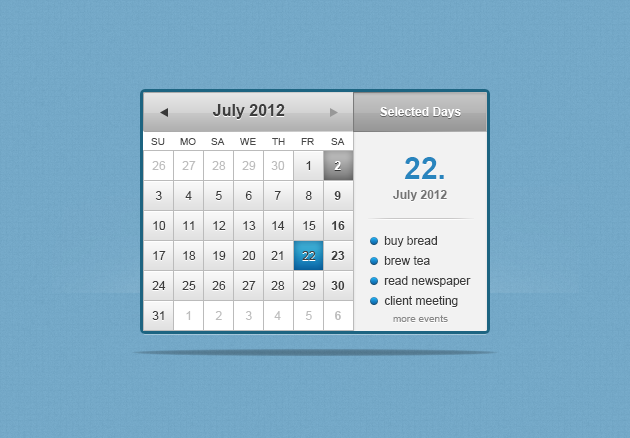
<style>
.page{position:relative;width:630px;height:438px}
.page>*{position:absolute;margin:0}
.t1{font:16px "Arial-BoldMT";color:#3e3e3e}
.t2{font:12px "Arial-BoldMT";color:#ffffff}
.t3{font:10px "ArialMT";color:#494949}
.t4{font:12px "ArialMT";color:#bdbdbd}
.t5{font:12px "ArialMT";color:#3d3d3d}
.t6{font:30px "Arial-BoldMT";color:#2985be}
.t7{font:12px "Arial-BoldMT";color:#3d3d3d}
.t8{font:12px "Arial-BoldMT";color:#737373}
.t9{font:12px/20px "ArialMT";color:#3d3d3d}
.t10{font:12px "Arial-BoldMT";color:#bdbdbd}
.t11{font:10px "ArialMT";color:#888888}
</style>
<div class="page">
<p class="t1" style="left:212px;top:104px;width:73px;height:15px">July 2012</p>
<p class="t2" style="left:380px;top:107px;width:81px;height:11px">Selected Days</p>
<p class="t3" style="left:151px;top:138px;width:14px;height:7px">SU</p>
<p class="t3" style="left:180px;top:138px;width:16px;height:7px">MO</p>
<p class="t3" style="left:211px;top:138px;width:14px;height:7px">SA</p>
<p class="t3" style="left:240px;top:138px;width:16px;height:7px">WE</p>
<p class="t3" style="left:272px;top:138px;width:13px;height:7px">TH</p>
<p class="t3" style="left:301px;top:138px;width:13px;height:7px">FR</p>
<p class="t3" style="left:331px;top:138px;width:14px;height:7px">SA</p>
<p class="t4" style="left:152px;top:161px;width:14px;height:9px">26</p>
<p class="t4" style="left:182px;top:161px;width:14px;height:9px">27</p>
<p class="t4" style="left:212px;top:161px;width:14px;height:9px">28</p>
<p class="t4" style="left:242px;top:161px;width:14px;height:9px">29</p>
<p class="t4" style="left:271px;top:161px;width:14px;height:9px">30</p>
<p class="t5" style="left:306px;top:161px;width:5px;height:9px">1</p>
<p class="t2" style="left:334px;top:161px;width:7px;height:9px">2</p>
<p class="t6" style="left:404px;top:157px;width:40px;height:22px">22.</p>
<p class="t5" style="left:155px;top:191px;width:7px;height:9px">3</p>
<p class="t5" style="left:185px;top:191px;width:7px;height:9px">4</p>
<p class="t5" style="left:215px;top:191px;width:7px;height:9px">5</p>
<p class="t5" style="left:245px;top:191px;width:7px;height:9px">6</p>
<p class="t5" style="left:274px;top:191px;width:7px;height:9px">7</p>
<p class="t5" style="left:305px;top:191px;width:7px;height:9px">8</p>
<p class="t7" style="left:334px;top:191px;width:7px;height:9px">9</p>
<p class="t8" style="left:393px;top:190px;width:54px;height:11px">July 2012</p>
<p class="t5" style="left:153px;top:221px;width:13px;height:9px">10</p>
<p class="t5" style="left:183px;top:221px;width:11px;height:9px">11</p>
<p class="t5" style="left:213px;top:221px;width:13px;height:9px">12</p>
<p class="t5" style="left:243px;top:221px;width:13px;height:9px">13</p>
<p class="t5" style="left:272px;top:221px;width:13px;height:9px">14</p>
<p class="t5" style="left:303px;top:221px;width:13px;height:9px">15</p>
<p class="t7" style="left:332px;top:221px;width:13px;height:9px">16</p>
<p class="t9" style="left:384px;top:236px;width:87px;height:71px">buy bread<br>brew tea<br>read newspaper<br>client meeting</p>
<p class="t5" style="left:153px;top:251px;width:13px;height:9px">17</p>
<p class="t5" style="left:183px;top:251px;width:13px;height:9px">18</p>
<p class="t5" style="left:213px;top:251px;width:13px;height:9px">19</p>
<p class="t5" style="left:242px;top:251px;width:14px;height:9px">20</p>
<p class="t5" style="left:271px;top:251px;width:12px;height:9px">21</p>
<p class="t5" style="left:302px;top:251px;width:14px;height:9px">22</p>
<p class="t7" style="left:331px;top:251px;width:14px;height:9px">23</p>
<p class="t5" style="left:152px;top:281px;width:14px;height:9px">24</p>
<p class="t5" style="left:182px;top:281px;width:14px;height:9px">25</p>
<p class="t5" style="left:212px;top:281px;width:14px;height:9px">26</p>
<p class="t5" style="left:242px;top:281px;width:14px;height:9px">27</p>
<p class="t5" style="left:271px;top:281px;width:14px;height:9px">28</p>
<p class="t5" style="left:302px;top:281px;width:14px;height:9px">29</p>
<p class="t7" style="left:331px;top:281px;width:14px;height:9px">30</p>
<p class="t5" style="left:152px;top:311px;width:12px;height:9px">31</p>
<p class="t4" style="left:186px;top:311px;width:5px;height:9px">1</p>
<p class="t4" style="left:215px;top:311px;width:7px;height:9px">2</p>
<p class="t4" style="left:245px;top:311px;width:7px;height:9px">3</p>
<p class="t4" style="left:274px;top:311px;width:7px;height:9px">4</p>
<p class="t4" style="left:305px;top:311px;width:7px;height:9px">5</p>
<p class="t10" style="left:335px;top:311px;width:6px;height:9px">6</p>
<p class="t11" style="left:393px;top:315px;width:55px;height:7px">more events</p>
</div>
